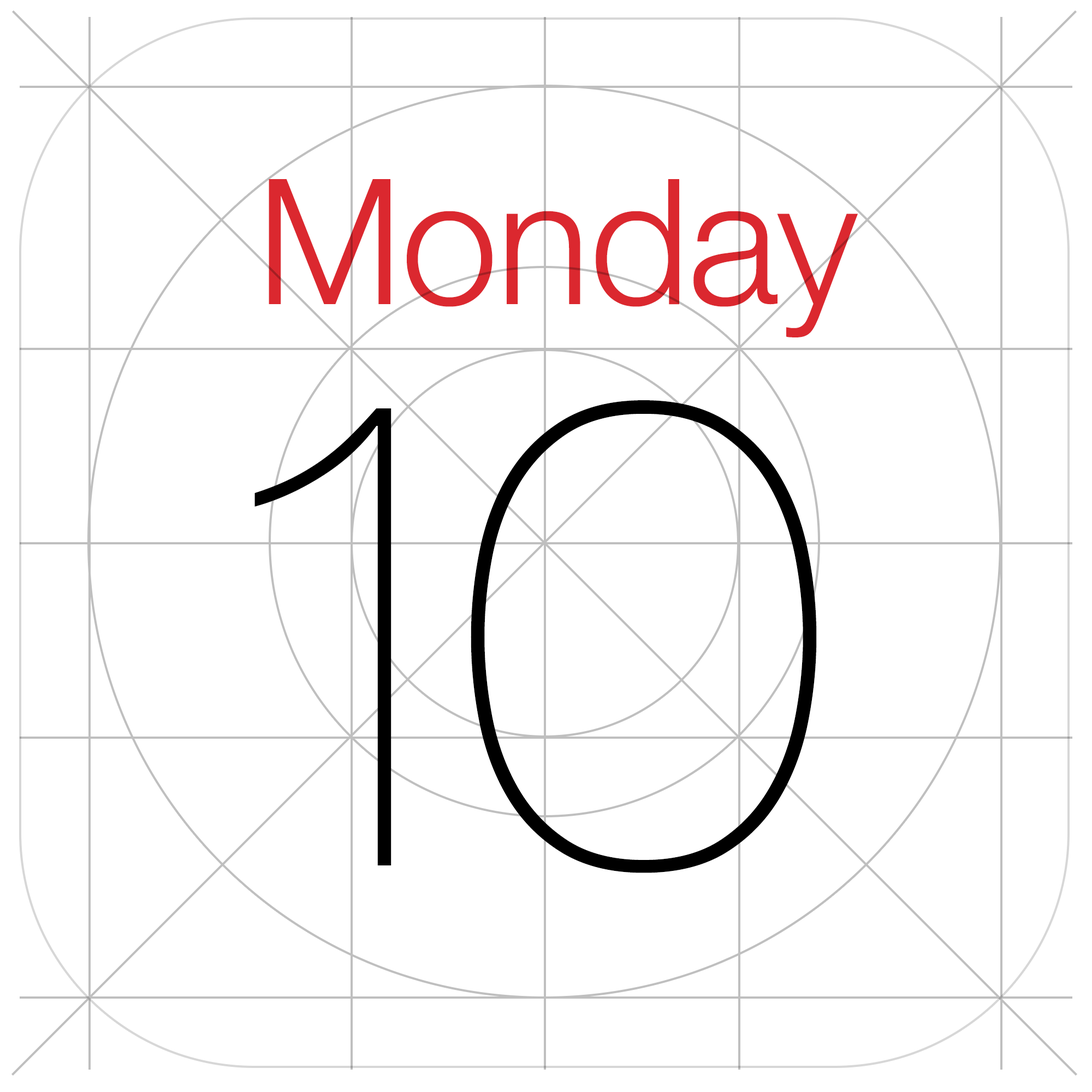
<style>
.page{position:relative;width:1092px;height:1092px;background:#ffffff}
.page>*{position:absolute;margin:0}
.t1{font:175.1px "HelveticaNeue-Light";letter-spacing:-0.01em;color:#db282f}
.t2{font:672.1px "HelveticaNeue-UltraLight";letter-spacing:-0.14em;color:#000000}
</style>
<div class="page">
<p class="t1" style="left:269px;top:179px;width:589px;height:158px">Monday</p>
<p class="t2" style="left:254px;top:400px;width:563px;height:473px">10</p>
</div>
